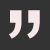
<style>
.page{position:relative;width:50px;height:50px;background:#333333}
.page>*{position:absolute;margin:0}
.t1{font:120px "ArialMT";color:#f4e8e8}
</style>
<div class="page">
<p class="t1" style="left:9px;top:10px;width:31px;height:29px">”</p>
</div>
